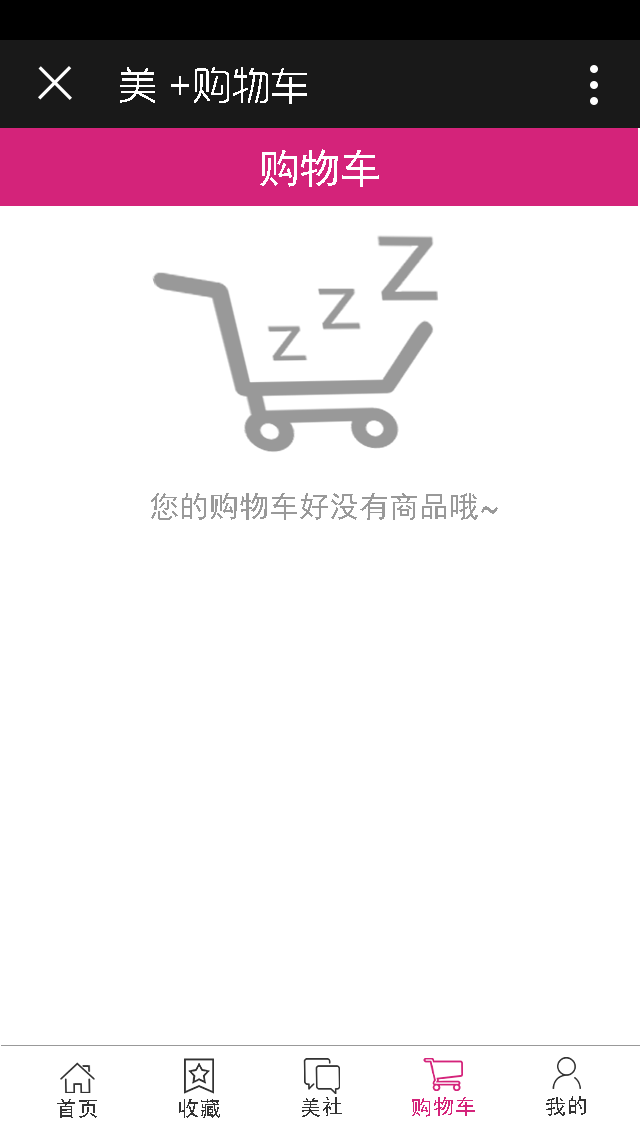
<style>
.page{position:relative;width:640px;height:1136px;background:#ffffff}
.page>*{position:absolute;margin:0}
.t1{font:38px "RTWSYueGoG0v1-ExLight";color:#ffffff;font-weight:bold}
.t2{font:70px "SimHei";color:#ffffff}
.t3{font:30px "SimHei";color:#999999}
.t4{font:70px "SimHei";color:#999999}
.t5{font:36px "SimHei";color:#333333}
.t6{font:36px "SimHei";color:#d4237a}
</style>
<div class="page">
<p class="t1" style="left:120px;top:67px;width:187px;height:37px">美 +购物车</p>
<p class="t2" style="left:260px;top:149px;width:119px;height:38px">购物车</p>
<p class="t3" style="left:151px;top:493px;width:347px;height:27px">您的购物车好没有商品哦<span class="t4">~</span></p>
<p class="t5" style="left:302px;top:1097px;width:40px;height:20px;rotate:-1deg">美社</p>
<p class="t6" style="left:412px;top:1097px;width:63px;height:20px;rotate:-1deg">购物车</p>
<p class="t5" style="left:546px;top:1096px;width:40px;height:20px;rotate:-1deg">我的</p>
<p class="t5" style="left:57px;top:1099px;width:40px;height:19px;rotate:-1deg">首页</p>
<p class="t5" style="left:179px;top:1099px;width:41px;height:19px;rotate:-1deg">收藏</p>
</div>
